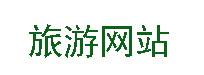
<style>
.page{position:relative;width:204px;height:75px;background:#ffffff}
.page>*{position:absolute;margin:0}
.t1{font:36px "SimHei";color:#0b6319}
</style>
<div class="page">
<p class="t1" style="left:29px;top:24px;width:140px;height:34px">旅游网站</p>
</div>
